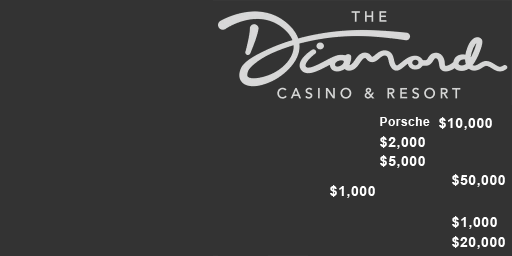
<style>
.page{position:relative;width:512px;height:256px;background:#333333}
.page>*{position:absolute;margin:0}
.t1{font:12px "Arial-BoldMT";letter-spacing:0.04em;color:#ffffff}
.t2{font:14px "Arial-BoldMT";letter-spacing:0.04em;color:#ffffff}
</style>
<div class="page">
<p class="t1" style="left:380px;top:117px;width:50px;height:9px">Porsche</p>
<p class="t2" style="left:439px;top:117px;width:53px;height:13px">$10,000</p>
<p class="t2" style="left:380px;top:136px;width:45px;height:13px">$2,000</p>
<p class="t2" style="left:380px;top:155px;width:45px;height:13px">$5,000</p>
<p class="t2" style="left:452px;top:174px;width:53px;height:13px">$50,000</p>
<p class="t2" style="left:330px;top:185px;width:45px;height:13px">$1,000</p>
<p class="t2" style="left:452px;top:216px;width:45px;height:13px">$1,000</p>
<p class="t2" style="left:452px;top:236px;width:53px;height:13px">$20,000</p>
</div>
